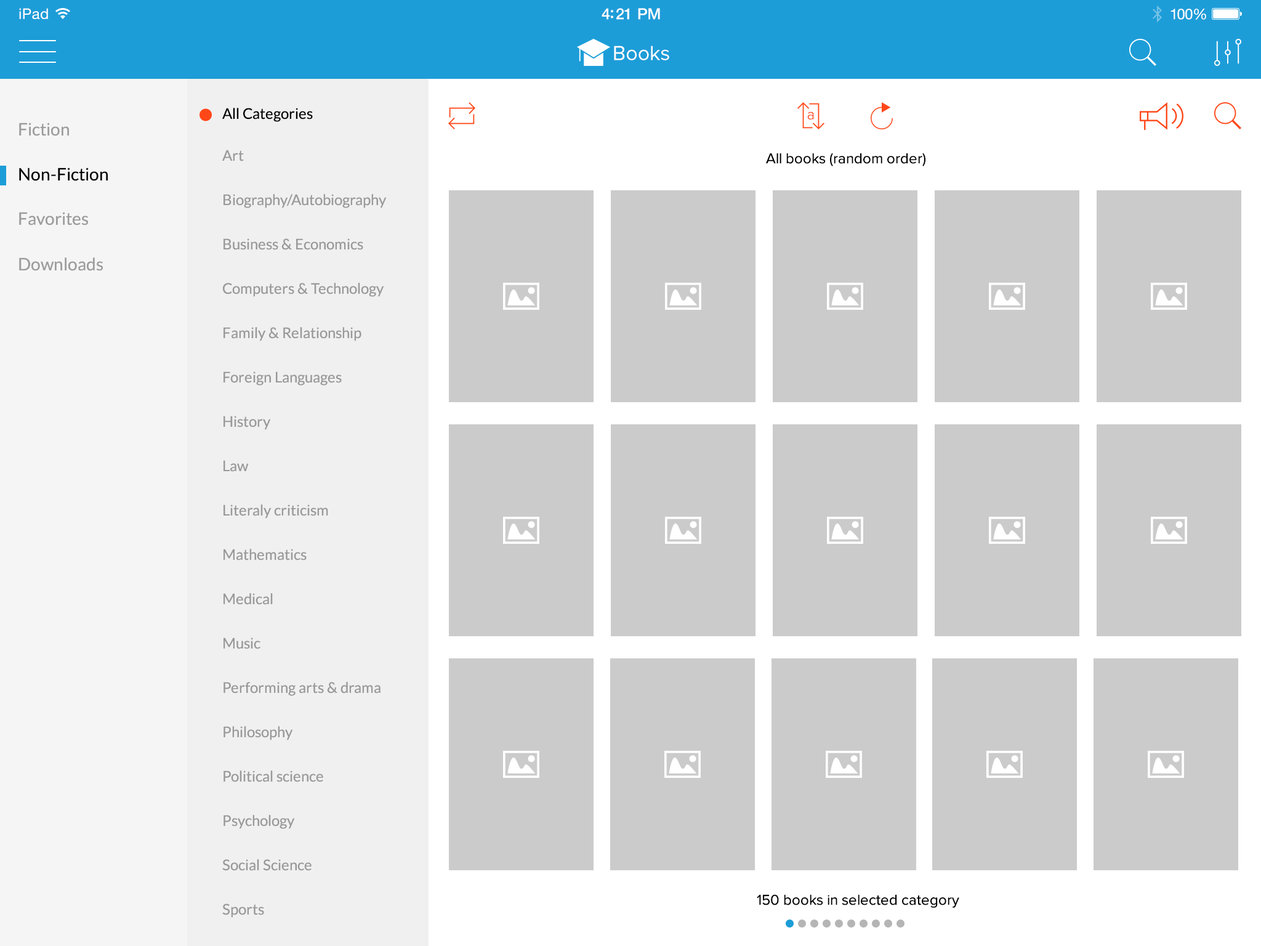
<style>
.page{position:relative;width:1261px;height:946px;background:#cbcbcb}
.page>*{position:absolute;margin:0}
.t1{font:14.6px "HelveticaNeue";letter-spacing:0.02em;color:#ffffff}
.t2{font:15.4px "HelveticaNeue-Medium";letter-spacing:-0.02em;color:#ffffff}
.t3{font:14.8px "HelveticaNeue";letter-spacing:-0.02em;color:#ffffff}
.t4{font:20.9px "ProximaNova-Regular";color:#ffffff}
.t5{font:14.8px "Lato-Regular";color:#000000}
.t6{font:14.8px "ProximaNova-Light";color:#ff4717}
.t7{font:17.2px "Lato-Regular";color:#9c9c9c}
.t8{font:14.8px "Lato-Regular";color:#999999}
.t9{font:14.7px "ProximaNova-Regular";color:#000000}
.t10{font:17.2px "Lato-Regular";color:#000000}
.t11{font:14.8px "ProximaNova-Regular";color:#000000}
</style>
<div class="page">
<p class="t1" style="left:19px;top:8px;width:29px;height:11px">iPad</p>
<p class="t2" style="left:602px;top:8px;width:58px;height:12px">4:21 PM</p>
<p class="t3" style="left:1170px;top:9px;width:36px;height:11px">100%</p>
<p class="t4" style="left:614px;top:46px;width:55px;height:14px">Books</p>
<p class="t5" style="left:222px;top:108px;width:91px;height:14px">All Categories</p>
<p class="t6" style="left:807px;top:111px;width:7px;height:8px">a</p>
<p class="t7" style="left:19px;top:123px;width:50px;height:13px">Fiction</p>
<p class="t8" style="left:222px;top:150px;width:22px;height:11px">Art</p>
<p class="t9" style="left:766px;top:153px;width:159px;height:13px">All books (random order)</p>
<p class="t10" style="left:19px;top:167px;width:89px;height:14px">Non-Fiction</p>
<p class="t8" style="left:223px;top:194px;width:164px;height:14px">Biography/Autobiography</p>
<p class="t7" style="left:19px;top:212px;width:69px;height:13px">Favorites</p>
<p class="t8" style="left:223px;top:238px;width:140px;height:12px">Business &amp; Economics</p>
<p class="t7" style="left:19px;top:257px;width:84px;height:14px">Downloads</p>
<p class="t8" style="left:223px;top:283px;width:161px;height:14px">Computers &amp; Technology</p>
<p class="t8" style="left:223px;top:327px;width:138px;height:14px">Family &amp; Relationship</p>
<p class="t8" style="left:223px;top:371px;width:119px;height:14px">Foreign Languages</p>
<p class="t8" style="left:223px;top:416px;width:48px;height:14px">History</p>
<p class="t8" style="left:223px;top:460px;width:26px;height:12px">Law</p>
<p class="t8" style="left:223px;top:504px;width:105px;height:14px">Literaly criticism</p>
<p class="t8" style="left:223px;top:549px;width:84px;height:11px">Mathematics</p>
<p class="t8" style="left:223px;top:593px;width:50px;height:12px">Medical</p>
<p class="t8" style="left:223px;top:637px;width:37px;height:12px">Music</p>
<p class="t8" style="left:223px;top:682px;width:157px;height:14px">Performing arts &amp; drama</p>
<p class="t8" style="left:223px;top:726px;width:70px;height:14px">Philosophy</p>
<p class="t8" style="left:223px;top:770px;width:100px;height:12px">Political science</p>
<p class="t8" style="left:223px;top:815px;width:72px;height:14px">Psychology</p>
<p class="t8" style="left:222px;top:859px;width:90px;height:12px">Social Science</p>
<p class="t11" style="left:757px;top:894px;width:202px;height:14px">150 books in selected category</p>
<p class="t8" style="left:222px;top:903px;width:42px;height:14px">Sports</p>
</div>
